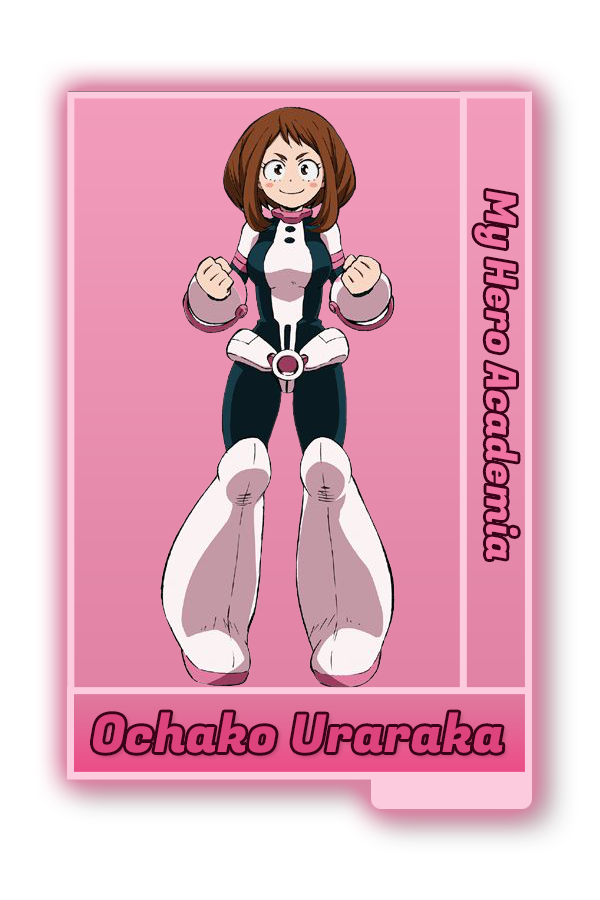
<style>
.page{position:relative;width:600px;height:900px;background:#ffffff}
.page>*{position:absolute;margin:0}
.t1{font:41px "FugazOne-Regular";color:#f175a2}
.t2{font:52px "FugazOne-Regular";color:#dd437c}
</style>
<div class="page">
<p class="t1" style="left:474px;top:190px;width:44px;height:370px;rotate:90deg">My Hero Academia</p>
<p class="t2" style="left:93px;top:712px;width:410px;height:41px">Ochako Uraraka</p>
</div>
